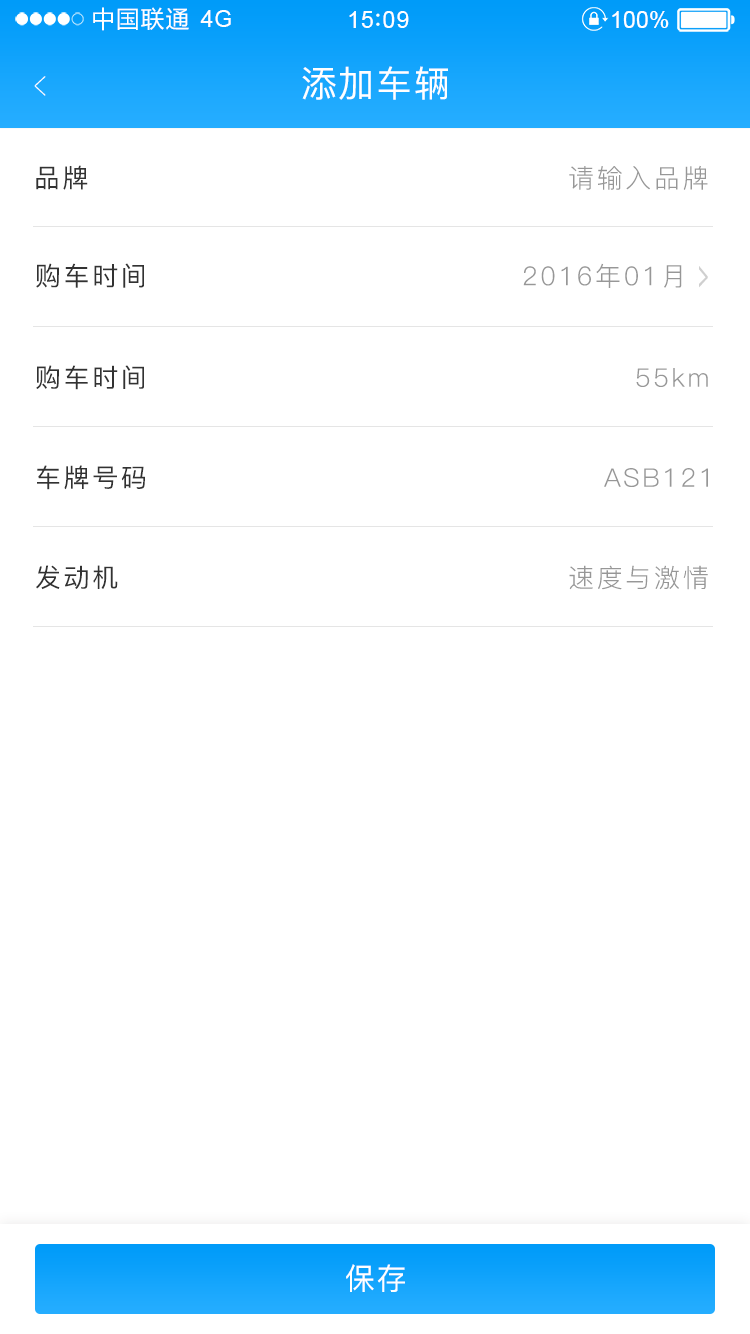
<style>
.page{position:relative;width:750px;height:1334px;background:#ffffff}
.page>*{position:absolute;margin:0}
.t1{font:23.4px "MicrosoftYaHei";letter-spacing:0.06em;color:#ffffff}
.t2{font:23.4px "ArialMT";letter-spacing:0.02em;color:#ffffff}
.t3{font:23.4px "ArialMT";letter-spacing:0.04em;color:#ffffff}
.t4{font:23.4px "ArialMT";color:#ffffff}
.t5{font:39px "PingFang-SC-ExtraLight";letter-spacing:0.1em;color:#ffffff;scale:0.51 1}
.t6{font:36px "PingFang-SC-Medium";letter-spacing:0.05em;color:#ffffff}
.t7{font:26px "PingFang-SC-Medium";letter-spacing:0.1em;color:#333333}
.t8{font:26.1px "PingFang-SC-Regular";letter-spacing:0.1em;color:#979797}
.t9{font:26px "PingFang-SC-Medium";letter-spacing:0.1em;color:#323232}
.t10{font:42px "MicrosoftYaHei";letter-spacing:0.1em;color:#cfcfcf;scale:0.45 1}
.t11{font:25.6px "PingFang-SC-Medium";letter-spacing:0.1em;color:#323232}
.t12{font:25.7px "PingFang-SC-Regular";letter-spacing:0.1em;color:#979797}
.t13{font:30px "PingFang-SC-Medium";letter-spacing:0.05em;color:#ffffff}
</style>
<div class="page">
<p class="t1" style="left:93px;top:7px;width:96px;height:24px">中国联通</p>
<p class="t2" style="left:200px;top:10px;width:31px;height:17px">4G</p>
<p class="t3" style="left:349px;top:11px;width:60px;height:17px">15 09</p>
<p class="t4" style="left:612px;top:11px;width:57px;height:17px">100%</p>
<p class="t5" style="left:34px;top:76px;width:12px;height:20px;rotate:180deg">&gt;</p>
<p class="t6" style="left:302px;top:66px;width:146px;height:34px">添加车辆</p>
<p class="t7" style="left:36px;top:165px;width:52px;height:25px">品牌</p>
<p class="t8" style="left:569px;top:165px;width:139px;height:25px">请输入品牌</p>
<p class="t9" style="left:36px;top:263px;width:108px;height:25px">购车时间</p>
<p class="t8" style="left:523px;top:263px;width:159px;height:25px">2016年01月</p>
<p class="t10" style="left:699px;top:266px;width:9px;height:22px">&gt;</p>
<p class="t11" style="left:36px;top:365px;width:108px;height:25px">购车时间</p>
<p class="t12" style="left:636px;top:368px;width:72px;height:19px">55km</p>
<p class="t11" style="left:37px;top:465px;width:108px;height:25px">车牌号码</p>
<p class="t12" style="left:604px;top:468px;width:104px;height:19px">ASB121</p>
<p class="t11" style="left:36px;top:565px;width:82px;height:25px">发动机</p>
<p class="t12" style="left:569px;top:565px;width:139px;height:25px">速度与激情</p>
<p class="t13" style="left:346px;top:1264px;width:59px;height:28px">保存</p>
</div>
